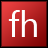
<style>
.page{position:relative;width:48px;height:48px}
.page>*{position:absolute;margin:0}
.t1{font:36px "SegoeUI";color:#ffffff}
</style>
<div class="page">
<p class="t1" style="left:8px;top:10px;width:29px;height:27px">fh</p>
</div>
